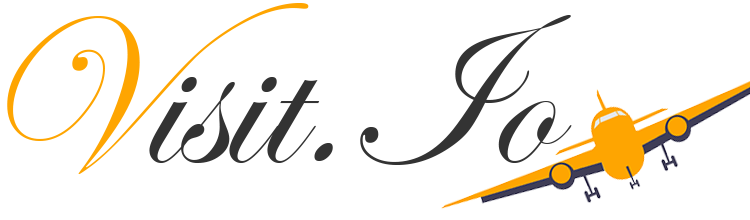
<style>
.page{position:relative;width:750px;height:220px;background:#ffffff}
.page>*{position:absolute;margin:0}
.t1{font:222.2px "EdwardianScriptITC";color:#333333}
.t2{font:222.2px "EdwardianScriptITC";color:#fea501}
</style>
<div class="page">
<p class="t1" style="left:7px;top:3px;width:565px;height:171px"><span class="t2">V</span>isit.Io</p>
</div>
